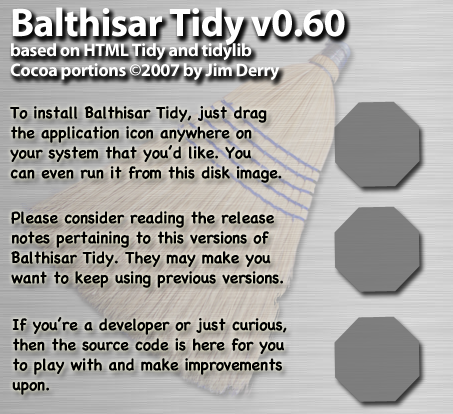
<style>
.page{position:relative;width:453px;height:414px}
.page>*{position:absolute;margin:0}
.t1{font:18px "MyriadPro-Bold";letter-spacing:-0.02em;color:#ffffff}
.t2{font:40px "MyriadPro-Bold";letter-spacing:-0.02em;color:#ffffff}
.t3{font:16px "Chalkboard-Bold";letter-spacing:-0.02em;color:#000000}
</style>
<div class="page">
<p class="t1" style="left:10px;top:7px;width:335px;height:73px"><span class="t2">Balthisar Tidy v0.60<br></span>based on HTML Tidy and tidylib<br>Cocoa portions ©2007 by Jim Derry</p>
<p class="t3" style="left:10px;top:106px;width:272px;height:77px">To install Balthisar Tidy, just drag<br>the application icon anywhere on<br>your system that you’d like. You<br>can even run it from this disk image.</p>
<p class="t3" style="left:11px;top:211px;width:272px;height:77px">Please consider reading the release<br>notes pertaining to this versions of<br>Balthisar Tidy. They may make you<br>want to keep using previous versions.</p>
<p class="t3" style="left:12px;top:317px;width:275px;height:78px">If you’re a developer or just curious,<br>then the source code is here for you<br>to play with and make improvements<br>upon.</p>
</div>
